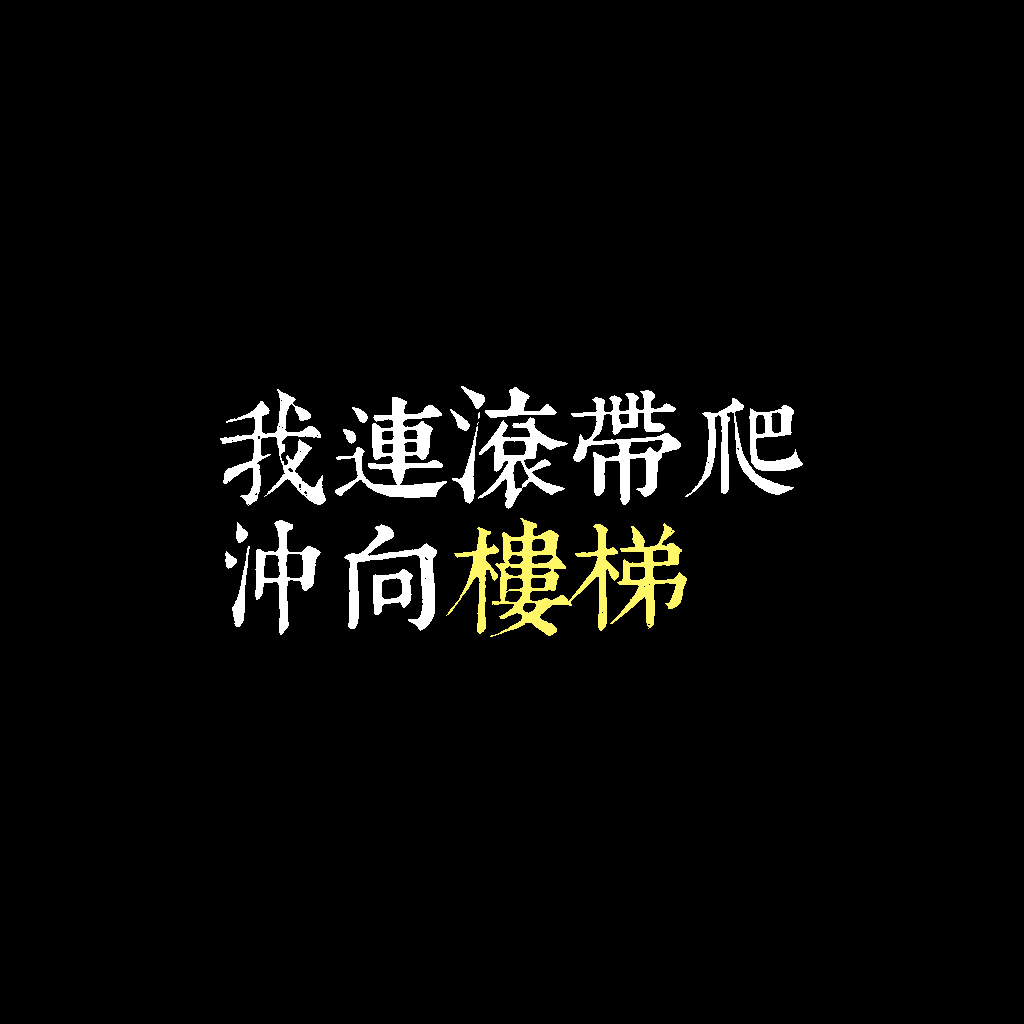
<style>
.page{position:relative;width:1024px;height:1024px;background:#000000}
.page>*{position:absolute;margin:0}
.t1{font:120px/130px "TpldKhangXiDictTrial";letter-spacing:-0.02em;color:#ffffff}
.t2{font:120px/130px "TpldKhangXiDictTrial";letter-spacing:-0.02em;color:#fff767}
</style>
<div class="page">
<p class="t1" style="left:220px;top:386px;width:583px;height:251px">我連滾帶爬<br>沖向<span class="t2">樓梯</span></p>
</div>
